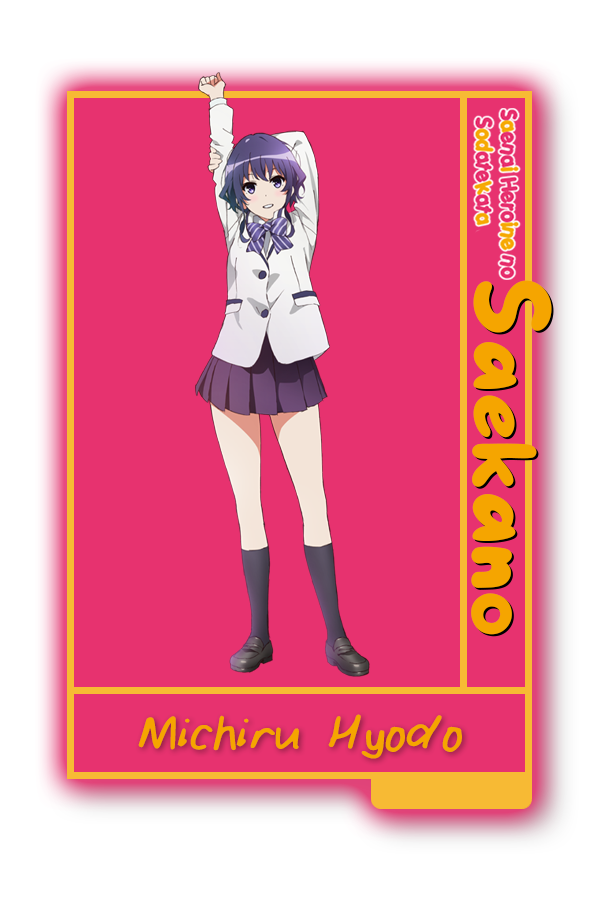
<style>
.page{position:relative;width:600px;height:900px;background:#e7326f}
.page>*{position:absolute;margin:0}
.t1{font:109.9px "Go-Mocha";color:#f5a500;scale:1.04 1}
.t2{font:56.9px "Girly_handwriting";color:#f5a500;scale:1.17 1}
</style>
<div class="page">
<p class="t1" style="left:471px;top:280px;width:81px;height:355px;rotate:91deg">Saekano</p>
<p class="t2" style="left:138px;top:714px;width:324px;height:45px">Michiru Hyodo</p>
</div>
